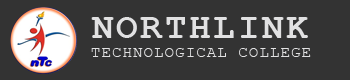
<style>
.page{position:relative;width:350px;height:80px;background:#333333}
.page>*{position:absolute;margin:0}
.t1{font:36px "CourierNewPS-BoldMT";letter-spacing:0.075em;color:#e1e1e2}
.t2{font:15.6px "CourierNewPSMT";letter-spacing:0.075em;color:#e1e1e2}
</style>
<div class="page">
<p class="t1" style="left:91px;top:17px;width:217px;height:21px">NORTHLINK</p>
<p class="t2" style="left:91px;top:48px;width:220px;height:9px">TECHNOLOGICAL COLLEGE</p>
</div>
